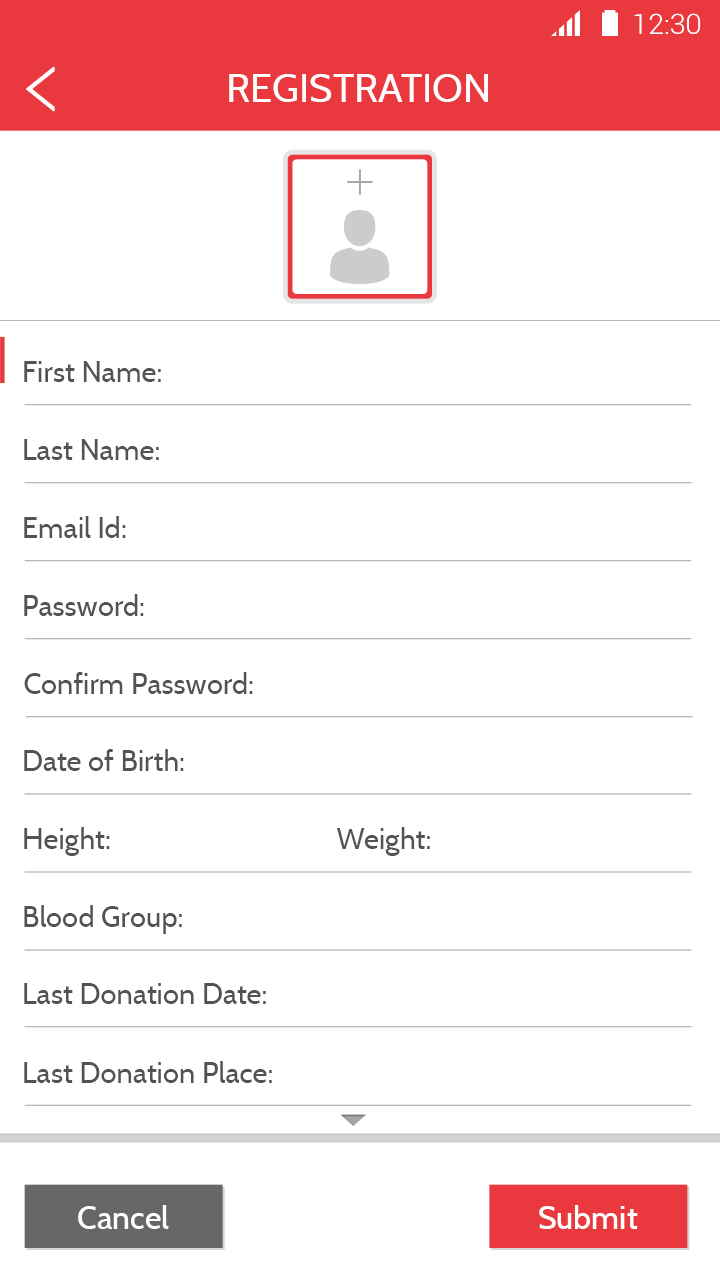
<style>
.page{position:relative;width:720px;height:1280px;background:#ffffff}
.page>*{position:absolute;margin:0}
.t1{font:28.4px "Roboto-Light";color:#ffffff}
.t2{font:40px "Cabin-Regular";color:#ffffff}
.t3{font:29.3px "Cabin-Regular";color:#535353}
.t4{font:32px "Cabin-Medium";color:#ffffff}
</style>
<div class="page">
<p class="t1" style="left:634px;top:13px;width:67px;height:21px">12:30</p>
<p class="t2" style="left:229px;top:74px;width:259px;height:28px">REGISTRATION</p>
<p class="t3" style="left:24px;top:361px;width:137px;height:21px">First Name:</p>
<p class="t3" style="left:24px;top:439px;width:135px;height:21px">Last Name:</p>
<p class="t3" style="left:24px;top:516px;width:102px;height:22px">Email Id:</p>
<p class="t3" style="left:24px;top:594px;width:120px;height:22px">Password:</p>
<p class="t3" style="left:24px;top:672px;width:229px;height:22px">Confirm Password:</p>
<p class="t3" style="left:24px;top:749px;width:160px;height:22px">Date of Birth:</p>
<p class="t3" style="left:24px;top:827px;width:86px;height:29px">Height:</p>
<p class="t3" style="left:337px;top:827px;width:93px;height:29px">Weight:</p>
<p class="t3" style="left:24px;top:905px;width:158px;height:29px">Blood Group:</p>
<p class="t3" style="left:24px;top:983px;width:242px;height:21px">Last Donation Date:</p>
<p class="t3" style="left:24px;top:1061px;width:248px;height:22px">Last Donation Place:</p>
<p class="t4" style="left:78px;top:1205px;width:91px;height:24px">Cancel</p>
<p class="t4" style="left:539px;top:1205px;width:99px;height:24px">Submit</p>
</div>
